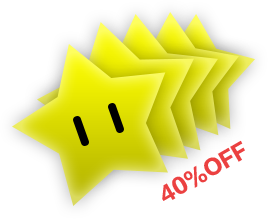
<style>
.page{position:relative;width:268px;height:219px;background:#ffffff}
.page>*{position:absolute;margin:0}
.t1{font:20px "FZLTTHK--GBK1-0";color:#eb4141}
</style>
<div class="page">
<p class="t1" style="left:162px;top:140px;width:83px;height:61px;rotate:-30deg">40%OFF</p>
</div>
